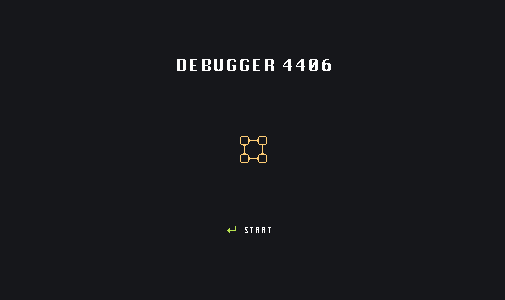
<style>
.page{position:relative;width:505px;height:300px;background:#16171b}
.page>*{position:absolute;margin:0}
.t1{font:16px "Krungthep";letter-spacing:0.145em;color:#fdfdfd}
.t2{font:8px "Krungthep";letter-spacing:0.145em;color:#ffffff}
</style>
<div class="page">
<p class="t1" style="left:177px;top:59px;width:154px;height:12px">DEBUGGER 4406</p>
<p class="t2" style="left:245px;top:227px;width:26px;height:6px">START</p>
</div>
